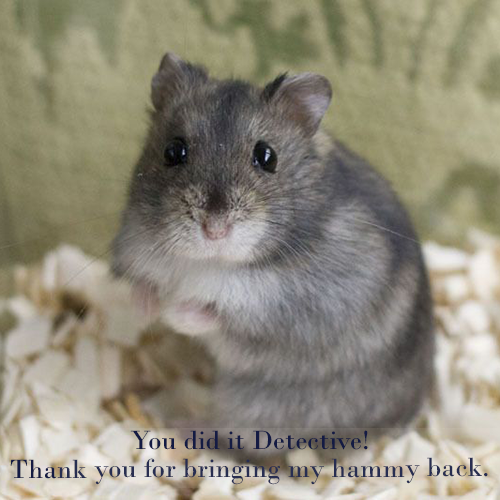
<style>
.page{position:relative;width:500px;height:500px}
.page>*{position:absolute;margin:0}
.t1{font:27.8px "BodoniMT";color:#141b43}
</style>
<div class="page">
<p class="t1" style="left:130px;top:430px;width:238px;height:20px">You did it Detective!</p>
<p class="t1" style="left:10px;top:457px;width:478px;height:28px">Thank you for bringing my hammy back.</p>
</div>
